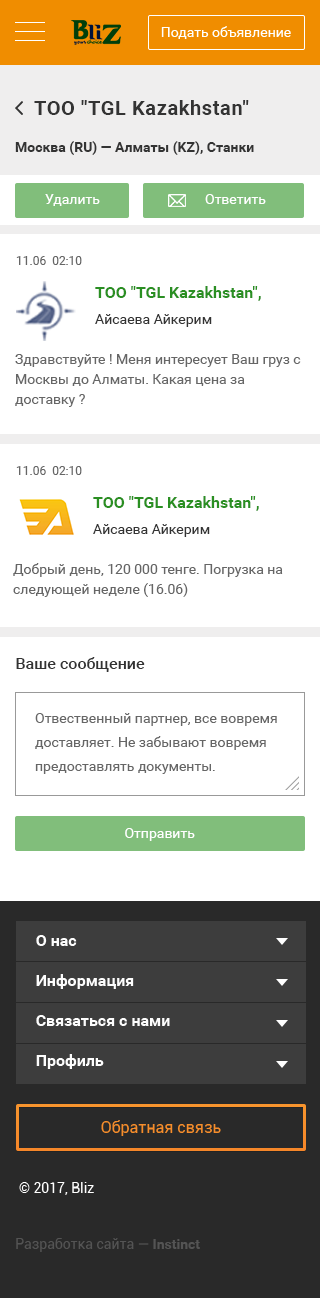
<style>
.page{position:relative;width:320px;height:1298px;background:#ffffff}
.page>*{position:absolute;margin:0}
.t1{font:20px "Roboto-Bold";letter-spacing:0.03em;color:#333333}
.t2{font:14px "Roboto-Bold";color:#333333}
.t3{font:14px "Roboto-Regular";color:#ffffff}
.t4{font:12px "Roboto-Regular";color:#666666}
.t5{font:14px/20px "Roboto-Regular";color:#666666}
.t6{font:16px/26px "Roboto-Bold";color:#2a8f22}
.t7{font:14px/26px "Roboto-Regular";color:#333333}
.t8{font:16px "Roboto-Medium";color:#333333}
.t9{font:14px/24px "Roboto-Regular";color:#666666}
</style>
<div class="page">
<p class="t1" style="left:34px;top:100px;width:215px;height:15px">ТОО "TGL Kazakhstan"</p>
<p class="t2" style="left:15px;top:141px;width:239px;height:14px">Москва (RU) — Алматы (KZ), Станки</p>
<p class="t3" style="left:45px;top:194px;width:55px;height:12px">Удалить</p>
<p class="t3" style="left:205px;top:194px;width:61px;height:10px">Ответить</p>
<p class="t4" style="left:16px;top:256px;width:66px;height:9px">11.06  02:10</p>
<p class="t5" style="left:15px;top:286px;width:286px;height:121px"><span class="t6">ТОО "TGL Kazakhstan",   <br></span><span class="t7">Айсаева Айкерим<br></span>Здравствуйте ! Меня интересует Ваш груз с Москвы до Алматы. Какая цена за доставку ?</p>
<p class="t4" style="left:16px;top:466px;width:66px;height:9px">11.06  02:10</p>
<p class="t5" style="left:13px;top:496px;width:270px;height:101px"><span class="t6">ТОО "TGL Kazakhstan",   <br></span><span class="t7">Айсаева Айкерим<br></span>Добрый день, 120 000 тенге. Погрузка на следующей неделе (16.06)</p>
<p class="t8" style="left:16px;top:657px;width:129px;height:15px">Ваше сообщение</p>
<p class="t9" style="left:35px;top:713px;width:242px;height:61px">Отвественный партнер, все вовремя доставляет. Не забывают вовремя предоставлять документы.</p>
<p class="t3" style="left:125px;top:828px;width:70px;height:13px">Отправить</p>
</div>
